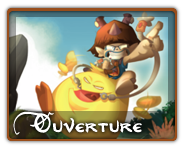
<style>
.page{position:relative;width:184px;height:148px}
.page>*{position:absolute;margin:0}
.t1{font:28px "Neverwinter";letter-spacing:0.01em;color:#ffffff}
</style>
<div class="page">
<p class="t1" style="left:13px;top:111px;width:129px;height:24px">Ouverture</p>
</div>
